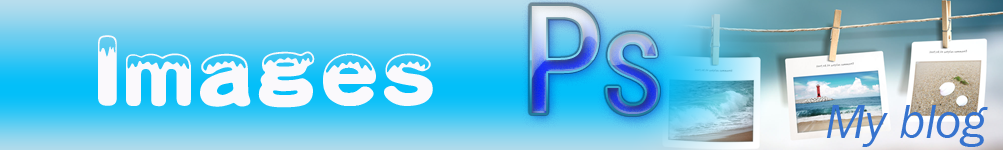
<style>
.page{position:relative;width:1003px;height:150px}
.page>*{position:absolute;margin:0}
.t1{font:160px "SimHei"}
.t2{font:120px "SimHei"}
.t3{font:81px "HYo2gj";color:#faf9fc}
.t4{font:48px "043-CAI978";color:#3673ce}
</style>
<div class="page">
<p class="t1" style="left:531px;top:6px;width:127px;height:108px">P<span class="t2">S</span></p>
<p class="t3" style="left:98px;top:35px;width:335px;height:73px">Images</p>
<p class="t4" style="left:826px;top:105px;width:162px;height:42px">My blog</p>
</div>
